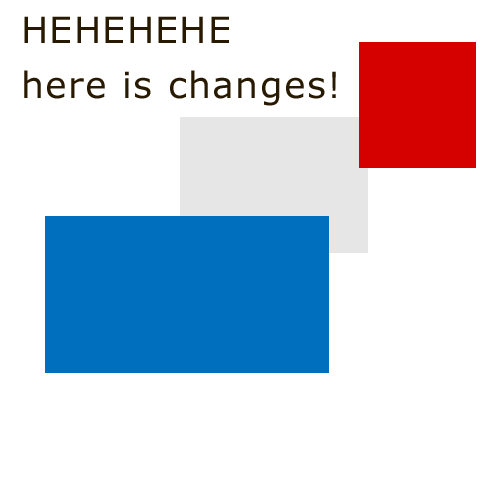
<style>
.page{position:relative;width:500px;height:500px;background:#ffffff}
.page>*{position:absolute;margin:0}
.t1{font:36.1px/54.2px "Verdana";letter-spacing:0.04em;color:#271a00}
</style>
<div class="page">
<p class="t1" style="left:24px;top:16px;width:312px;height:90px">HEHEHEHE<br>here is changes!</p>
</div>
